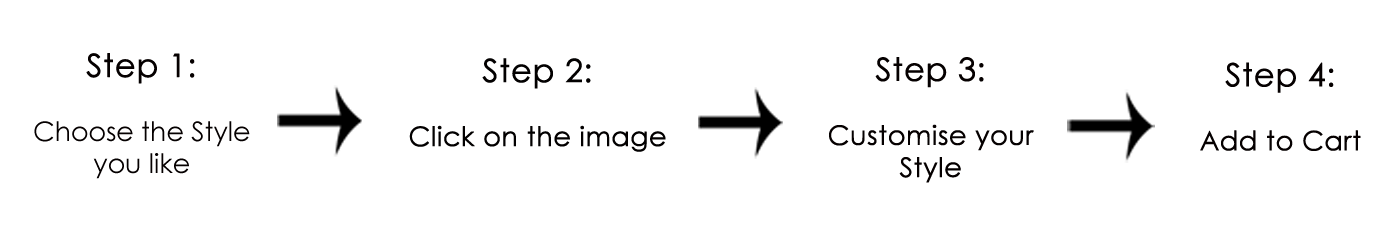
<style>
.page{position:relative;width:1400px;height:230px;background:#ffffff}
.page>*{position:absolute;margin:0}
.t1{font:26.7px "CenturyGothic";color:#050000}
.t2{font:32px "CenturyGothic";color:#050000;font-weight:bold}
.t3{font:26.7px "CenturyGothic";color:#020000;font-weight:bold}
.t4{font:32px "CenturyGothic";color:#020000;font-weight:bold}
.t5{font:26.7px "CenturyGothic";color:#050000;font-weight:bold}
</style>
<div class="page">
<p class="t1" style="left:34px;top:53px;width:216px;height:126px;text-align:center"><span class="t2">Step 1:<br></span><br>Choose the Style you like</p>
<p class="t3" style="left:409px;top:58px;width:257px;height:94px;text-align:center"><span class="t4">Step 2:<br></span><br>Click on the image</p>
<p class="t5" style="left:829px;top:57px;width:205px;height:126px;text-align:center"><span class="t2">Step 3:<br></span><br>Customise your Style</p>
<p class="t5" style="left:1200px;top:62px;width:161px;height:89px;text-align:center"><span class="t2">Step 4:<br></span><br>Add to Cart</p>
</div>
